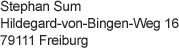
<style>
.page{position:relative;width:179px;height:48px;background:#ffffff}
.page>*{position:absolute;margin:0}
.t1{font:14px "ArialMT";letter-spacing:-0.024em;color:#222222}
</style>
<div class="page">
<p class="t1" style="left:0px;top:0px;width:179px;height:48px">Stephan Sum<br>Hildegard-von-Bingen-Weg 16<br>79111 Freiburg</p>
</div>
